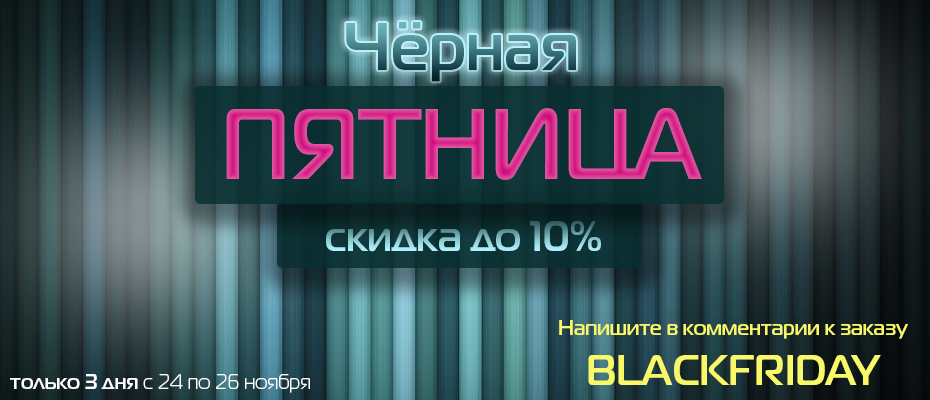
<style>
.page{position:relative;width:930px;height:400px}
.page>*{position:absolute;margin:0}
.t1{font:66.7px "MagistralC-Bold"}
.t2{font:100px "MagistralC-Bold";scale:0.93 1}
.t3{font:41.7px "MagistralC-Bold"}
.t4{font:20.8px "MagistralC-Bold";color:#f8f868}
.t5{font:41.7px "MagistralC-Bold";color:#f8f868}
.t6{font:20.8px "MagistralC";color:#ffffff}
.t7{font:20.8px "MagistralC-Bold";color:#ffffff}
</style>
<div class="page">
<p class="t1" style="left:346px;top:22px;width:230px;height:60px">Чёрная</p>
<p class="t2" style="left:226px;top:108px;width:476px;height:72px">ПЯТНИЦА</p>
<p class="t3" style="left:326px;top:221px;width:275px;height:31px">скидка до 10%</p>
<p class="t4" style="left:559px;top:320px;width:349px;height:65px;text-align:center">Напишите в комментарии к заказу<br><span class="t5">BLACKFRIDAY</span></p>
<p class="t6" style="left:10px;top:374px;width:300px;height:19px"><span class="t7">только 3 дня</span> с 24 по 26 ноября</p>
</div>
